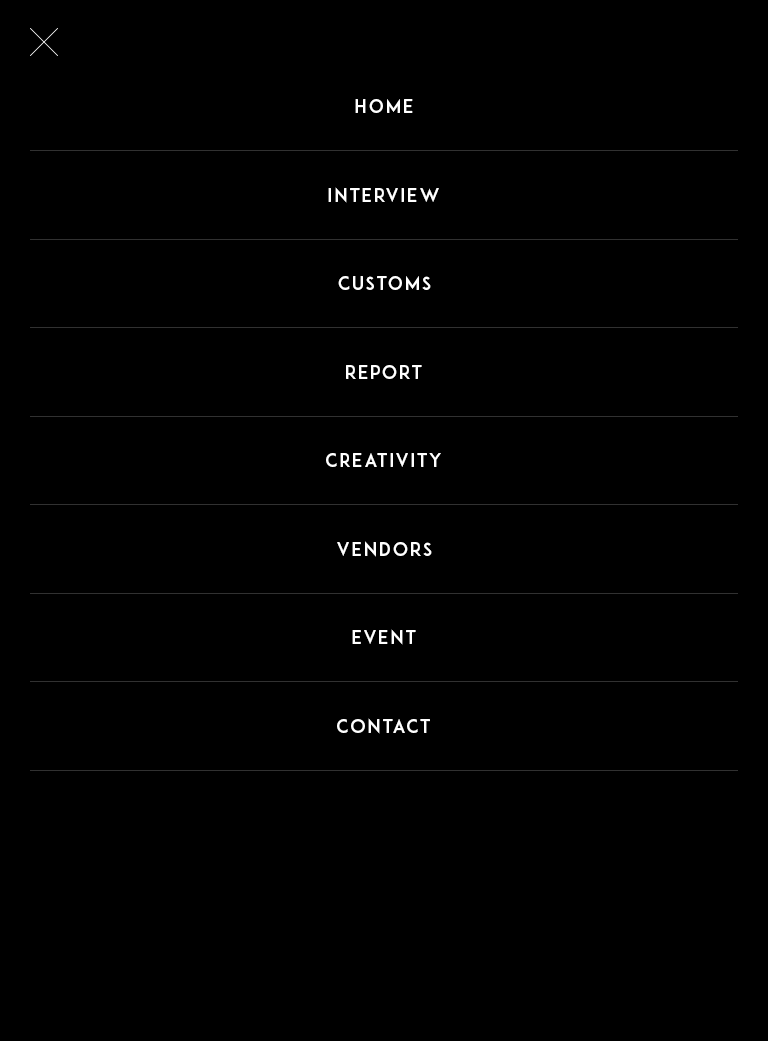
<style>
.page{position:relative;width:768px;height:1041px;background:#000000}
.page>*{position:absolute;margin:0}
.t1{font:18px "ADAM.CGPRO";letter-spacing:0.1em;color:#ffffff}
</style>
<div class="page">
<p class="t1" style="left:355px;top:99px;width:58px;height:14px">HOME</p>
<p class="t1" style="left:328px;top:187px;width:111px;height:16px">INTERVIEW</p>
<p class="t1" style="left:338px;top:276px;width:93px;height:14px">cUSTOMS</p>
<p class="t1" style="left:346px;top:365px;width:76px;height:14px">report</p>
<p class="t1" style="left:326px;top:453px;width:115px;height:14px">cREATIVITY</p>
<p class="t1" style="left:337px;top:541px;width:95px;height:16px">vendors</p>
<p class="t1" style="left:352px;top:629px;width:64px;height:16px">EVENT</p>
<p class="t1" style="left:337px;top:718px;width:93px;height:16px">CONTACT</p>
</div>
